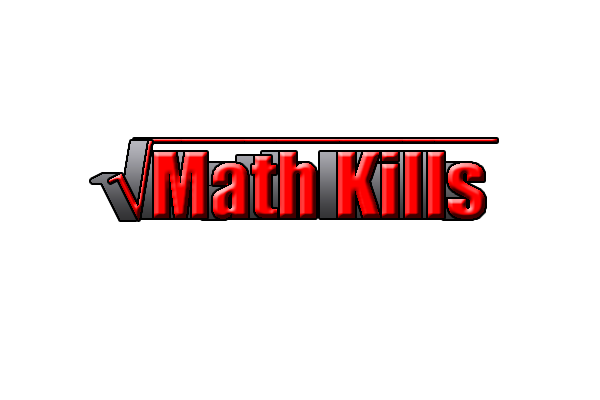
<style>
.page{position:relative;width:600px;height:400px;background:#ffffff}
.page>*{position:absolute;margin:0}
.t1{font:83.6px "Impact"}
</style>
<div class="page">
<p class="t1" style="left:109px;top:141px;width:376px;height:79px">√Math Kills</p>
</div>
